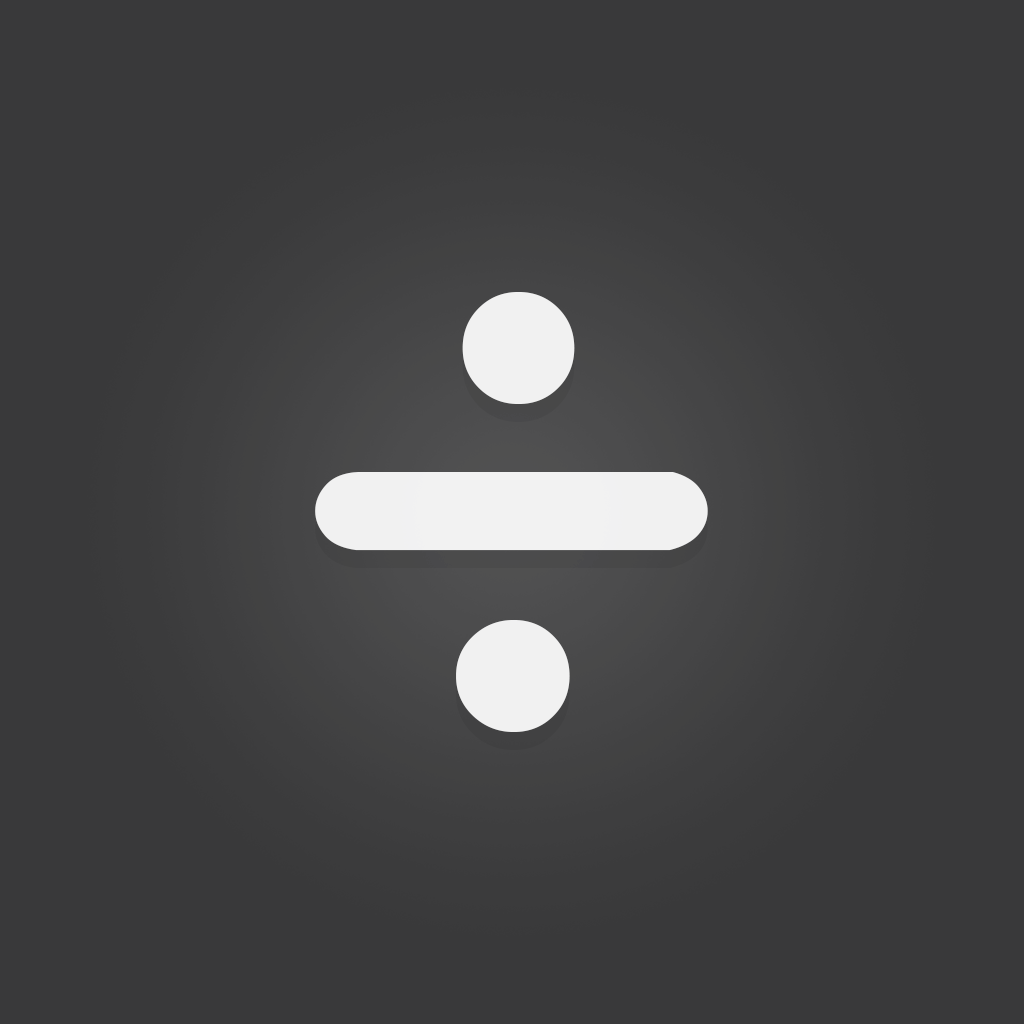
<style>
.page{position:relative;width:1024px;height:1024px;background:#39393a}
.page>*{position:absolute;margin:0}
.t1{font:859.5px "Chalkboard";color:#f1f1f1}
</style>
<div class="page">
<p class="t1" style="left:315px;top:292px;width:393px;height:440px">÷</p>
</div>
